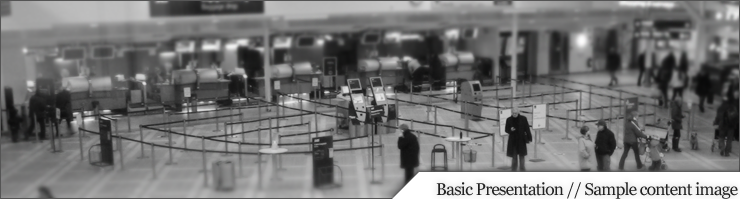
<style>
.page{position:relative;width:740px;height:199px}
.page>*{position:absolute;margin:0}
.t1{font:17px "Georgia";letter-spacing:-0.04em;color:#222222}
</style>
<div class="page">
<p class="t1" style="left:436px;top:182px;width:302px;height:17px">Basic Presentation // Sample content image</p>
</div>
